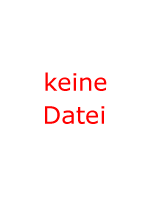
<style>
.page{position:relative;width:150px;height:200px;background:#ffffff}
.page>*{position:absolute;margin:0}
.t1{font:24px "Verdana";color:#ff0000}
</style>
<div class="page">
<p class="t1" style="left:45px;top:72px;width:62px;height:19px">keine</p>
<p class="t1" style="left:45px;top:106px;width:60px;height:18px">Datei</p>
</div>
